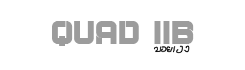
<style>
.page{position:relative;width:245px;height:70px;background:#ffffff}
.page>*{position:absolute;margin:0}
.t1{font:35px "Locator-Regular";color:#9c9c9c}
</style>
<div class="page">
<p class="t1" style="left:52px;top:21px;width:142px;height:25px">QUAD IIB</p>
</div>
